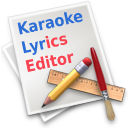
<style>
.page{position:relative;width:128px;height:128px;background:#ffffff}
.page>*{position:absolute;margin:0}
.t1{font:16px "DejaVuSansCondensed-Bold";color:#2c6ed5}
.t2{font:16px "DejaVuSansCondensed-Bold";color:#fa4251}
</style>
<div class="page">
<p class="t1" style="left:17px;top:12px;width:66px;height:60px;rotate:-12deg">Karaoke<br>Lyr<span class="t2">ics<br>Editor</span></p>
</div>
